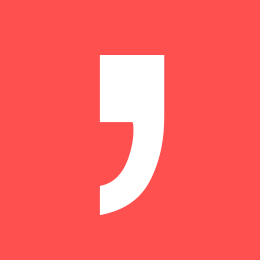
<style>
.page{position:relative;width:260px;height:260px;background:#ff5050}
.page>*{position:absolute;margin:0}
.t1{font:624.7px "Helvetica";color:#ffffff}
</style>
<div class="page">
<p class="t1" style="left:99px;top:55px;width:66px;height:160px">,</p>
</div>
